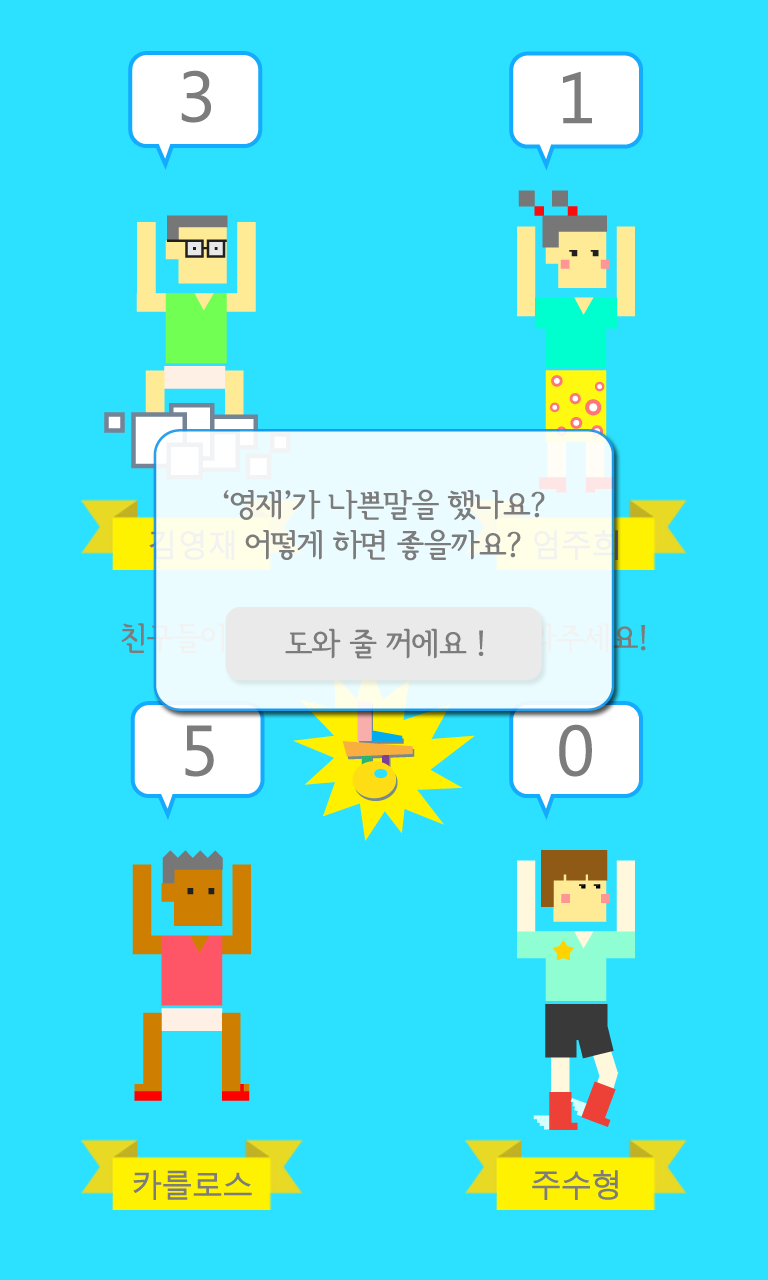
<style>
.page{position:relative;width:768px;height:1280px;background:#2ce0ff}
.page>*{position:absolute;margin:0}
.t1{font:68.9px "MalgunGothicRegular";letter-spacing:-0.05em;color:#7c7c7c;font-weight:bold}
.t2{font:31.1px/40px "SeoulHangangM";letter-spacing:-0.05em;color:#7c7c7c;font-weight:bold}
.t3{font:31.1px "SeoulHangangM";letter-spacing:-0.05em;color:#7c7c7c;font-weight:bold}
.t4{font:31.1px "MalgunGothicRegular";letter-spacing:-0.05em;color:#7c7c7c;font-weight:bold}
</style>
<div class="page">
<p class="t1" style="left:181px;top:70px;width:30px;height:53px">3</p>
<p class="t1" style="left:563px;top:71px;width:29px;height:53px">1</p>
<p class="t2" style="left:223px;top:489px;width:322px;height:72px;text-align:center">‘영재’가 나쁜말을 했나요?<br>어떻게 하면 좋을까요?</p>
<p class="t3" style="left:285px;top:628px;width:199px;height:31px">도와 줄 꺼에요 !</p>
<p class="t1" style="left:185px;top:725px;width:29px;height:52px">5</p>
<p class="t1" style="left:559px;top:724px;width:33px;height:53px">0</p>
<p class="t4" style="left:133px;top:1170px;width:119px;height:30px">카를로스</p>
<p class="t4" style="left:532px;top:1170px;width:86px;height:30px">주수형</p>
</div>
